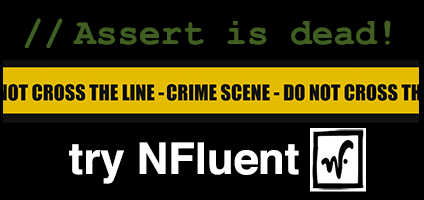
<style>
.page{position:relative;width:424px;height:200px;background:#000000}
.page>*{position:absolute;margin:0}
.t1{font:36px "CourierNewPS-BoldMT";color:#415f23}
.t2{font:43.7px "Helvetica-Bold";color:#ffffff}
</style>
<div class="page">
<p class="t1" style="left:24px;top:18px;width:367px;height:31px">// Assert is dead!</p>
<p class="t2" style="left:69px;top:142px;width:230px;height:42px">try NFluent</p>
</div>
